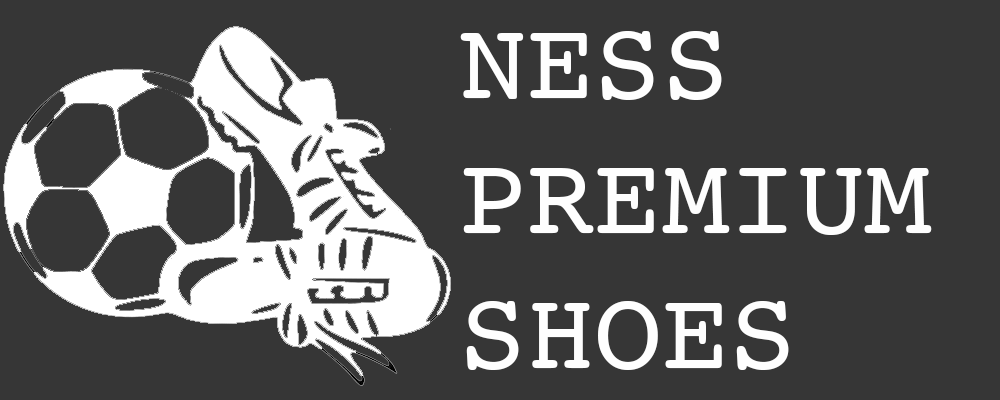
<style>
.page{position:relative;width:1000px;height:400px;background:#363636}
.page>*{position:absolute;margin:0}
.t1{font:112.5px "Courier";color:#fefefe}
</style>
<div class="page">
<p class="t1" style="left:460px;top:31px;width:472px;height:339px">NESS<br>PREMIUM<br>SHOES</p>
</div>
